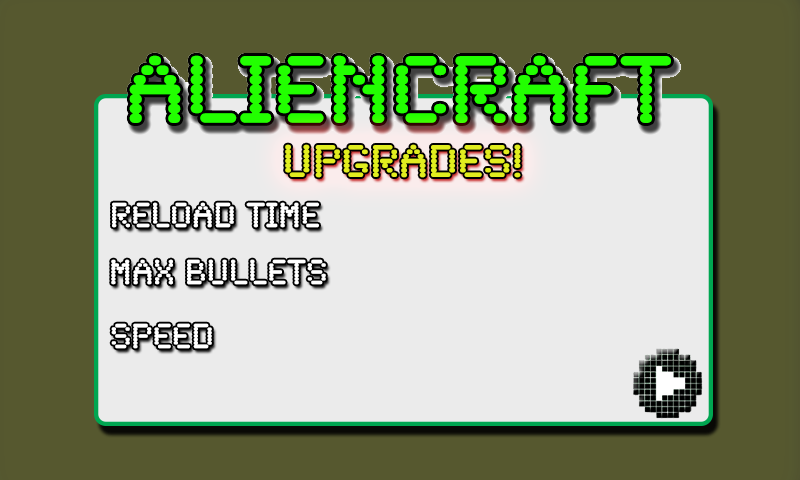
<style>
.page{position:relative;width:800px;height:480px;background:#56582f}
.page>*{position:absolute;margin:0}
.t1{font:48px "SynchroLET";color:#e1ed1f}
.t2{font:36px "SynchroLET";color:#ffffff}
</style>
<div class="page">
<p class="t1" style="left:285px;top:144px;width:236px;height:34px">UPGRADES!</p>
<p class="t2" style="left:112px;top:202px;width:207px;height:26px">RELOAD TIME</p>
<p class="t2" style="left:111px;top:259px;width:215px;height:26px">MAX BULLETS</p>
<p class="t2" style="left:111px;top:323px;width:101px;height:26px">SPEED</p>
</div>
